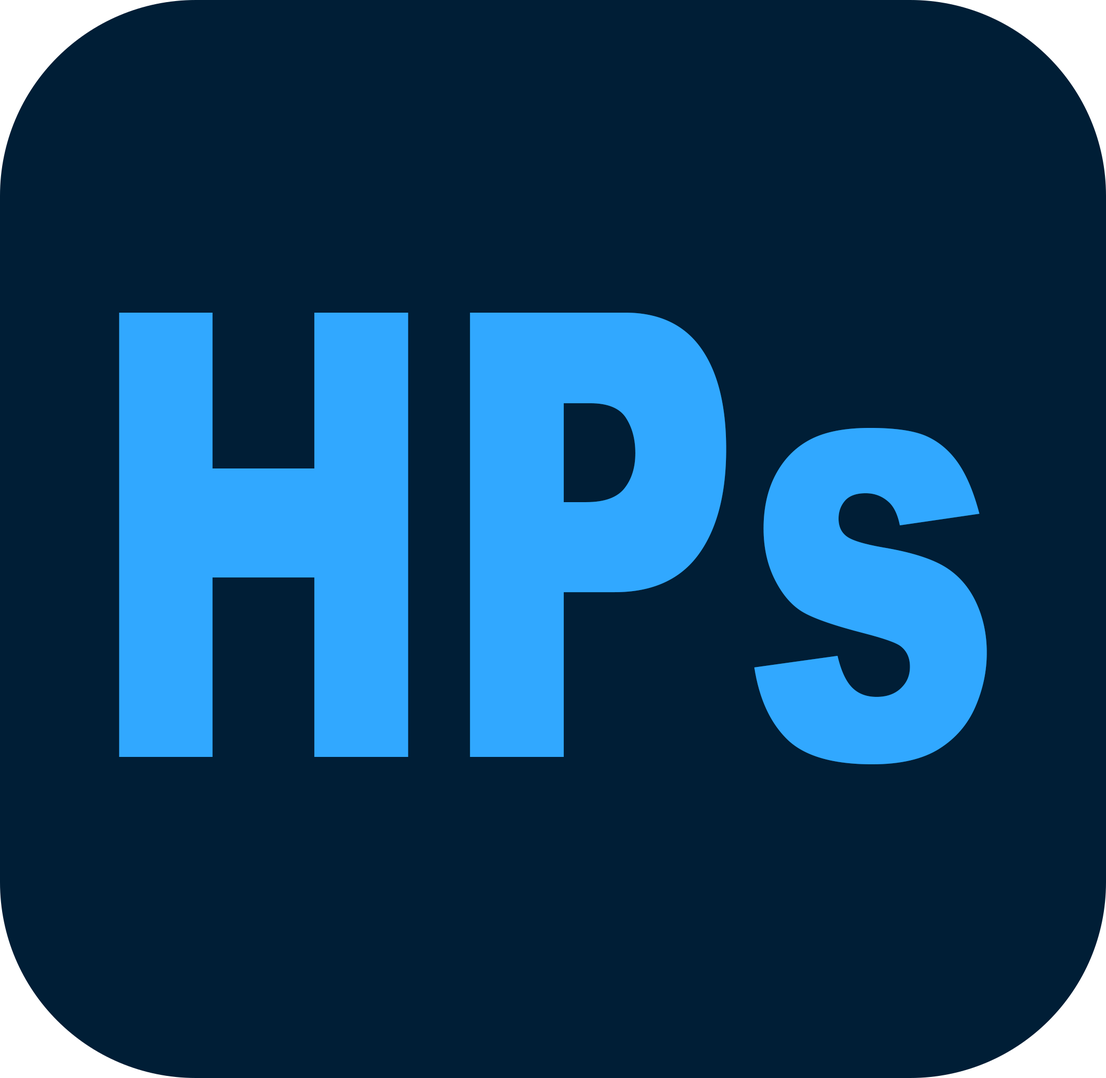
<style>
.page{position:relative;width:1106px;height:1078px;background:#001e36}
.page>*{position:absolute;margin:0}
.t1{font:620.4px "Arial-Black";color:#31a8ff;scale:0.68 1}
</style>
<div class="page">
<p class="t1" style="left:119px;top:313px;width:868px;height:451px">HPs</p>
</div>
